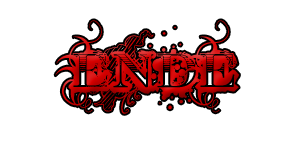
<style>
.page{position:relative;width:300px;height:150px;background:#ffffff}
.page>*{position:absolute;margin:0}
.t1{font:72px "VtksRevolt"}
</style>
<div class="page">
<p class="t1" style="left:55px;top:20px;width:184px;height:94px">ENDE</p>
</div>
